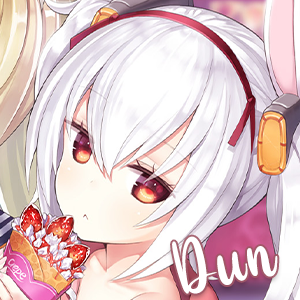
<style>
.page{position:relative;width:300px;height:300px}
.page>*{position:absolute;margin:0}
.t1{font:85px "Maple-Memories";letter-spacing:0.04em;color:#ffffff}
</style>
<div class="page">
<p class="t1" style="left:172px;top:236px;width:106px;height:58px;rotate:-14deg">Dun</p>
</div>
